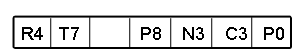
<style>
.page{position:relative;width:300px;height:50px;background:#ffffff}
.page>*{position:absolute;margin:0}
.t1{font:18px "ArialMT";color:#000000}
</style>
<div class="page">
<p class="t1" style="left:22px;top:27px;width:262px;height:13px">R4   T7            P8    N3    C3   P0</p>
</div>
